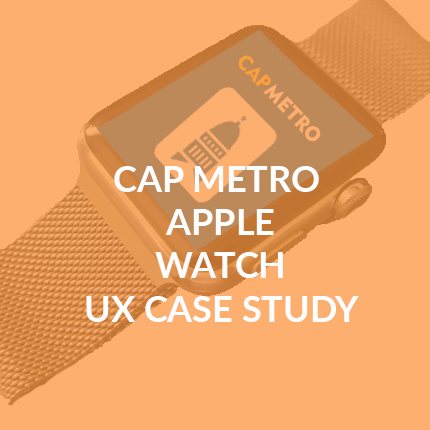
<style>
.page{position:relative;width:430px;height:430px;background:#fdaf6f}
.page>*{position:absolute;margin:0}
.t1{font:36px "Lato-Bold";color:#fffefe}
</style>
<div class="page">
<p class="t1" style="left:86px;top:166px;width:273px;height:156px;text-align:center">CAP METRO <br>APPLE<br>WATCH<br>UX CASE STUDY</p>
</div>
